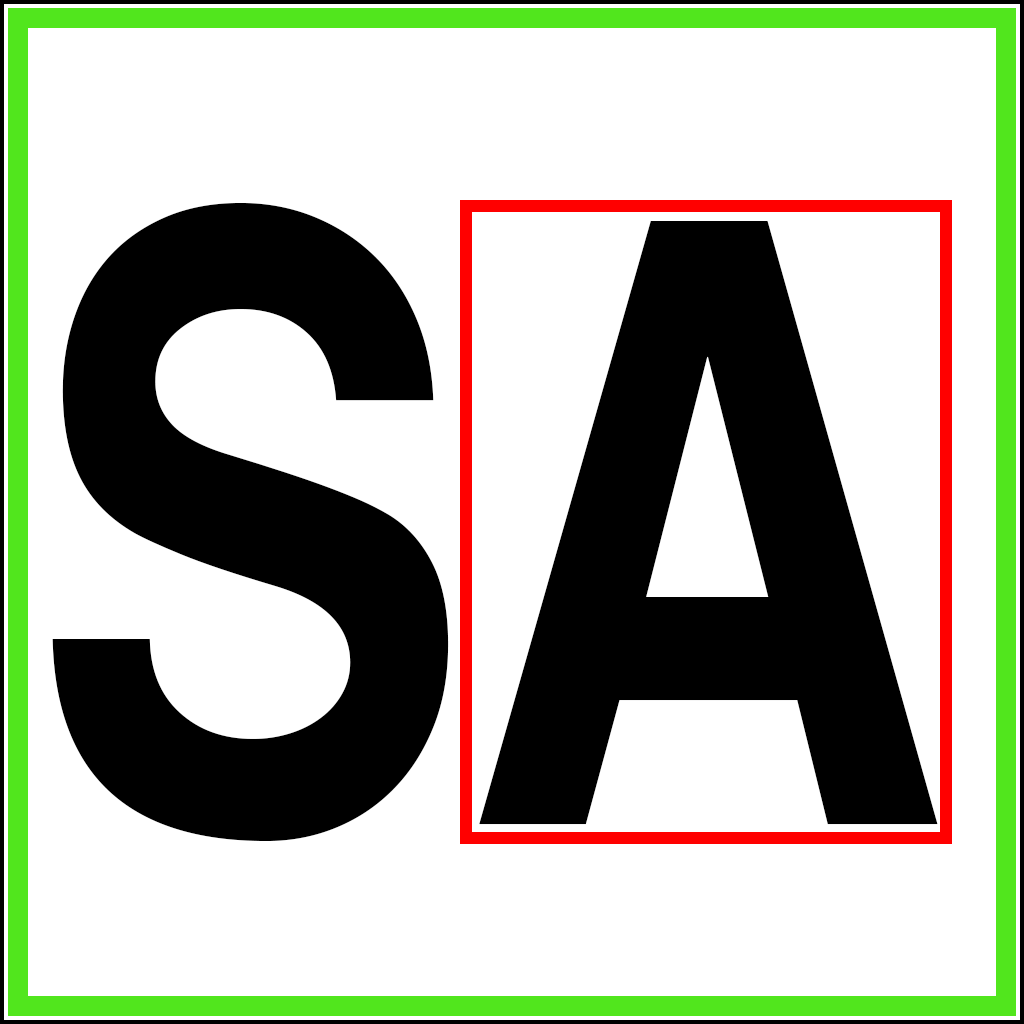
<style>
.page{position:relative;width:1024px;height:1024px;background:#ffffff}
.page>*{position:absolute;margin:0}
.t1{font:980.4px "Coolvetica-Regular";letter-spacing:0.06em;color:#000000;scale:0.8 1}
</style>
<div class="page">
<p class="t1" style="left:52px;top:203px;width:886px;height:638px">SA</p>
</div>
